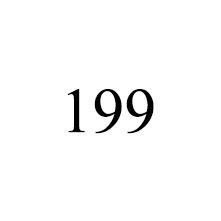
<style>
.page{position:relative;width:221px;height:221px;background:#ffffff}
.page>*{position:absolute;margin:0}
.t1{font:63.9px "TimesNewRomanPSMT";color:#000000}
</style>
<div class="page">
<p class="t1" style="left:67px;top:89px;width:87px;height:45px">199</p>
</div>
